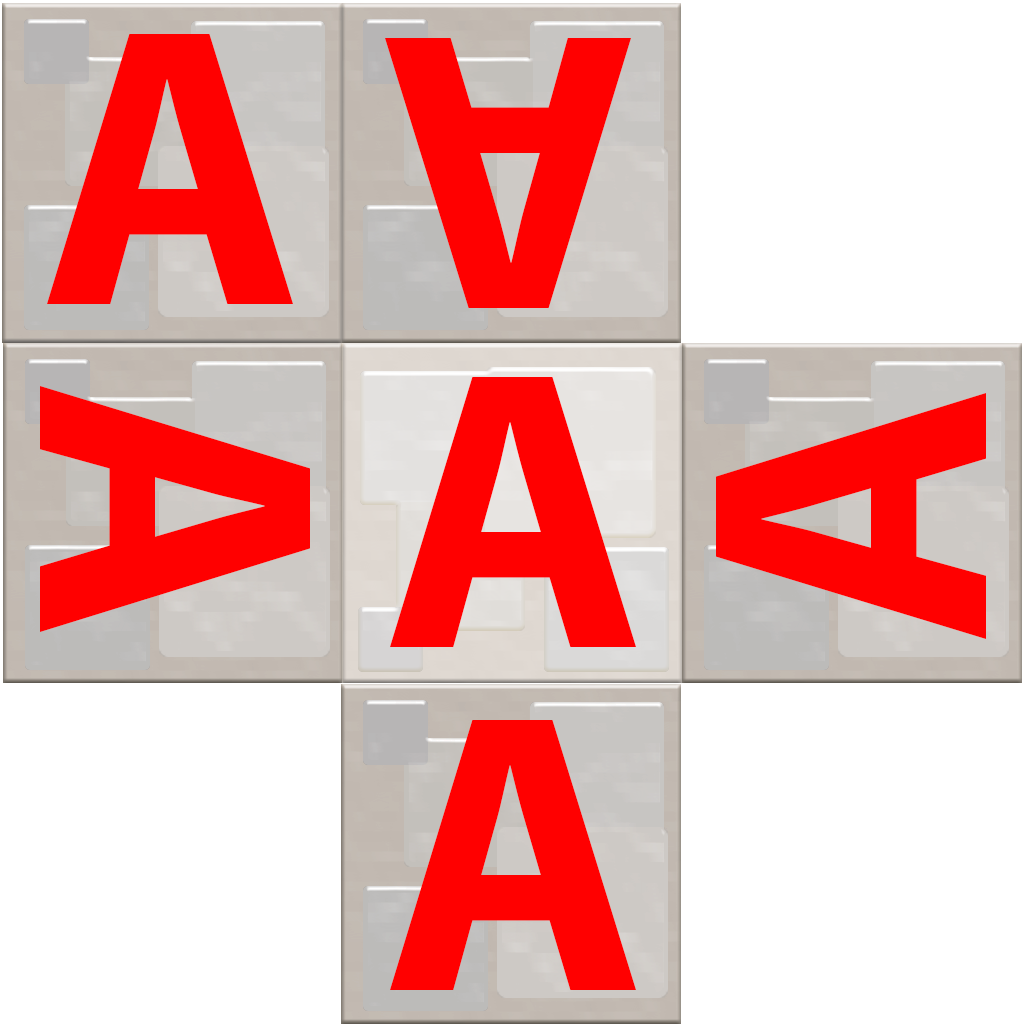
<style>
.page{position:relative;width:1024px;height:1024px;background:#ffffff}
.page>*{position:absolute;margin:0}
.t1{font:400px "MyriadPro-Bold";color:#ff0000}
</style>
<div class="page">
<p class="t1" style="left:47px;top:34px;width:246px;height:270px">A</p>
<p class="t1" style="left:385px;top:38px;width:246px;height:270px;rotate:-180deg">A</p>
<p class="t1" style="left:390px;top:377px;width:246px;height:270px">A</p>
<p class="t1" style="left:40px;top:386px;width:270px;height:246px;rotate:90deg">A</p>
<p class="t1" style="left:716px;top:393px;width:270px;height:246px;rotate:-90deg">A</p>
<p class="t1" style="left:390px;top:720px;width:246px;height:270px">A</p>
</div>
